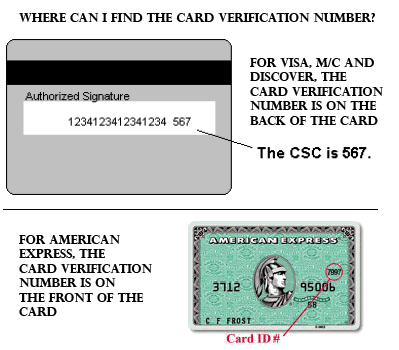
<style>
.page{position:relative;width:399px;height:350px;background:#ffffff}
.page>*{position:absolute;margin:0}
.t1{font:12px "PerpetuaTitlingMT-Bold";color:#000000}
</style>
<div class="page">
<p class="t1" style="left:19px;top:13px;width:356px;height:9px">Where can I find the card verification number?</p>
<p class="t1" style="left:250px;top:58px;width:133px;height:67px">FOR VISA, M/C AND<br>DISCOVER, tHE<br>CARD VERIFICATION<br>NUMBER IS ON THE<br>BACK OF THE CARD</p>
<p class="t1" style="left:19px;top:235px;width:133px;height:81px">For American<br>Express, The<br>CARD VERIFICATION<br>NUMBER IS ON<br>THE FRONT OF THE<br>CARD</p>
</div>
